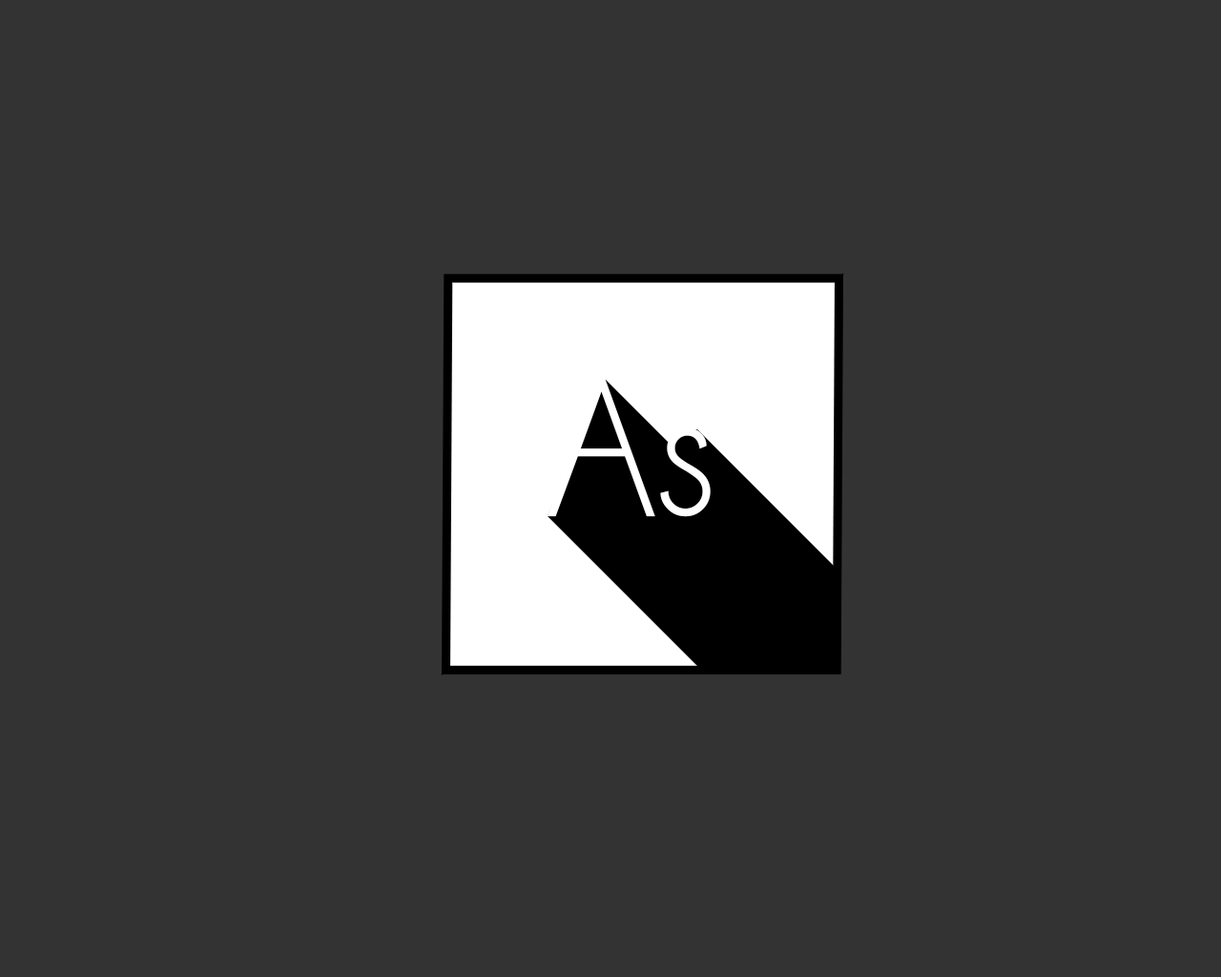
<style>
.page{position:relative;width:1221px;height:977px;background:#333333}
.page>*{position:absolute;margin:0}
.t1{font:47.4px "Champagne&Limousines";color:#ffffff}
</style>
<div class="page">
<p class="t1" style="left:547px;top:380px;width:164px;height:137px">As</p>
</div>
